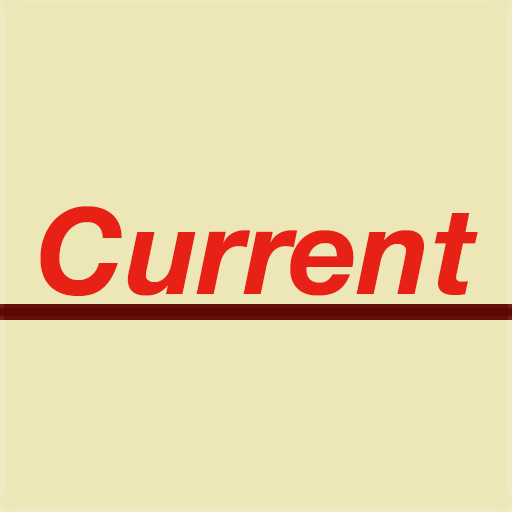
<style>
.page{position:relative;width:512px;height:512px;background:#ede7b8}
.page>*{position:absolute;margin:0}
.t1{font:120px "HelveticaNeue-BoldItalic";color:#e72116}
</style>
<div class="page">
<p class="t1" style="left:40px;top:206px;width:438px;height:90px">Current</p>
</div>
